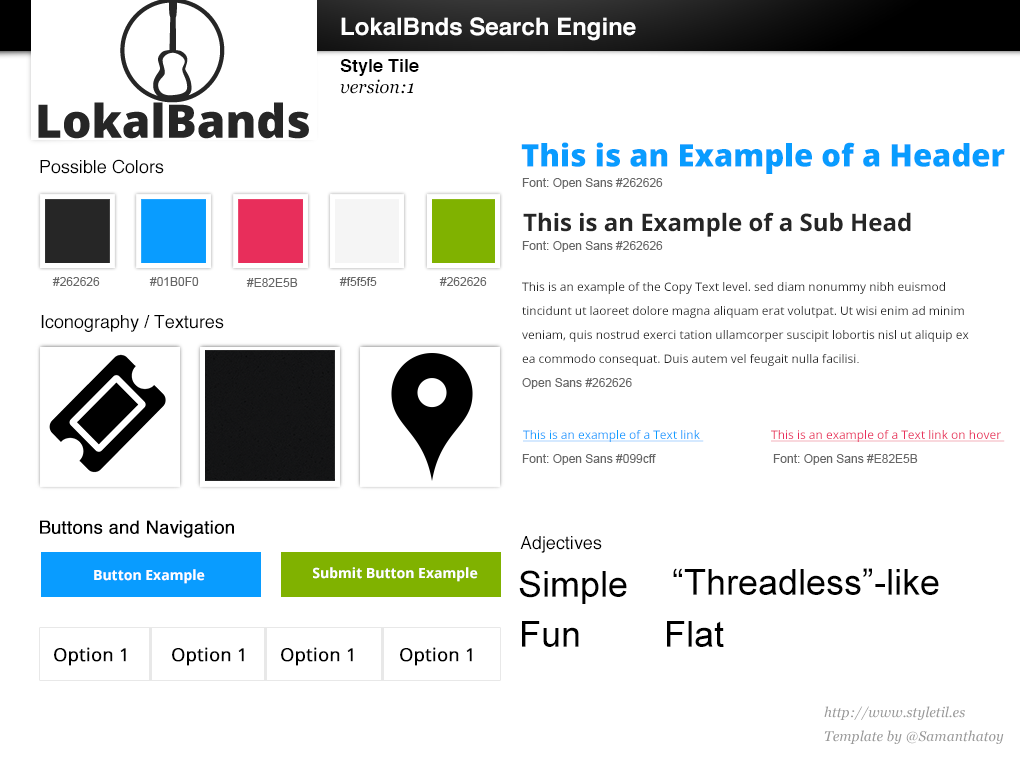
<style>
.page{position:relative;width:1020px;height:760px;background:#ffffff}
.page>*{position:absolute;margin:0}
.t1{font:24px "Helvetica-Bold";color:#ffffff}
.t2{font:18px "Helvetica-Bold";color:#000000}
.t3{font:18px "Georgia-Italic";color:#000000}
.t4{font:31px "OpenSans-Extrabold";color:#099cff}
.t5{font:18px "Helvetica";color:#000000}
.t6{font:12px "ArialMT";color:#666666}
.t7{font:24px "OpenSans-Bold";color:#262626}
.t8{font:12px/24px "OpenSans";color:#262626}
.t9{font:12px/24px "ArialMT";color:#000000}
.t10{font:12px "OpenSans";color:#099cff;text-decoration:underline}
.t11{font:12px "OpenSans";color:#e82e5b;text-decoration:underline}
.t12{font:18px "Helvetica";color:#000000;font-weight:bold}
.t13{font:14px "OpenSans-Bold";color:#ffffff}
.t14{font:36px "ArialMT";color:#000000}
.t15{font:18px "OpenSans";color:#000000;font-weight:bold}
.t16{font:14px/24px "Georgia-Italic";color:#999999}
</style>
<div class="page">
<p class="t1" style="left:341px;top:17px;width:295px;height:24px">LokalBnds Search Engine</p>
<p class="t2" style="left:340px;top:59px;width:79px;height:17px">Style Tile</p>
<p class="t3" style="left:340px;top:79px;width:74px;height:15px">version:1</p>
<p class="t4" style="left:521px;top:142px;width:484px;height:32px">This is an Example of a Header</p>
<p class="t5" style="left:40px;top:159px;width:124px;height:15px">Possible Colors</p>
<p class="t6" style="left:522px;top:178px;width:141px;height:11px">Font: Open Sans #262626</p>
<p class="t7" style="left:523px;top:212px;width:388px;height:25px">This is an Example of a Sub Head</p>
<p class="t6" style="left:522px;top:241px;width:141px;height:11px">Font: Open Sans #262626</p>
<p class="t6" style="left:52px;top:277px;width:48px;height:9px">#262626</p>
<p class="t6" style="left:149px;top:277px;width:50px;height:9px">#01B0F0</p>
<p class="t6" style="left:246px;top:278px;width:52px;height:9px">#E82E5B</p>
<p class="t6" style="left:339px;top:277px;width:38px;height:9px">#f5f5f5</p>
<p class="t6" style="left:439px;top:277px;width:48px;height:9px">#262626</p>
<p class="t8" style="left:522px;top:282px;width:447px;height:84px">This is an example of the Copy Text level. sed diam nonummy nibh euismod tincidunt ut laoreet dolore magna aliquam erat volutpat. Ut wisi enim ad minim veniam, quis nostrud exerci tation ullamcorper suscipit lobortis nisl ut aliquip ex ea commodo consequat. Duis autem vel feugait nulla facilisi<span class="t9">.</span></p>
<p class="t5" style="left:41px;top:315px;width:183px;height:17px">Iconography / Textures</p>
<p class="t6" style="left:522px;top:378px;width:110px;height:11px">Open Sans #262626</p>
<p class="t10" style="left:523px;top:430px;width:181px;height:12px">This is an example of a Text link</p>
<p class="t11" style="left:771px;top:430px;width:234px;height:12px">This is an example of a Text link on hover</p>
<p class="t6" style="left:522px;top:454px;width:134px;height:11px">Font: Open Sans #099cff</p>
<p class="t6" style="left:773px;top:454px;width:145px;height:11px">Font: Open Sans #E82E5B</p>
<p class="t12" style="left:40px;top:520px;width:194px;height:18px">Buttons and Navigation</p>
<p class="t5" style="left:520px;top:536px;width:82px;height:17px">Adjectives</p>
<p class="t13" style="left:94px;top:569px;width:111px;height:15px">Button Example</p>
<p class="t13" style="left:313px;top:567px;width:165px;height:15px">Submit Button Example</p>
<p class="t14" style="left:673px;top:568px;width:266px;height:27px">“Threadless”-like</p>
<p class="t14" style="left:519px;top:570px;width:108px;height:34px">Simple</p>
<p class="t14" style="left:522px;top:621px;width:57px;height:26px">Fun</p>
<p class="t14" style="left:667px;top:621px;width:57px;height:26px">Flat</p>
<p class="t15" style="left:54px;top:647px;width:72px;height:19px">Option 1</p>
<p class="t15" style="left:172px;top:647px;width:72px;height:19px">Option 1</p>
<p class="t15" style="left:281px;top:647px;width:72px;height:19px">Option 1</p>
<p class="t15" style="left:400px;top:647px;width:72px;height:19px">Option 1</p>
<p class="t16" style="left:824px;top:706px;width:180px;height:38px">http://www.styletil.es<br>Template by @Samanthatoy</p>
</div>
